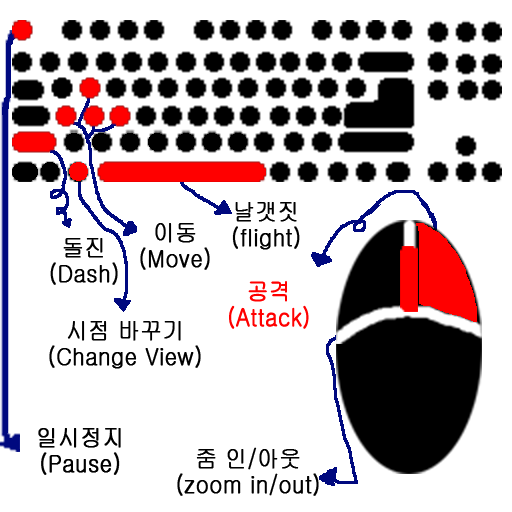
<style>
.page{position:relative;width:512px;height:512px;background:#ffffff}
.page>*{position:absolute;margin:0}
.t1{font:24px/26px "Gulim";color:#000000;font-weight:bold;scale:0.9 1}
.t2{font:24px/26px "Gulim";color:#ff0000;font-weight:bold;scale:0.9 1}
</style>
<div class="page">
<p class="t1" style="left:232px;top:202px;width:68px;height:48px;text-align:center">날갯짓<br>(flight)</p>
<p class="t1" style="left:140px;top:223px;width:70px;height:47px;text-align:center">이동<br>(Move)</p>
<p class="t1" style="left:50px;top:238px;width:68px;height:47px;text-align:center">돌진<br>(Dash)</p>
<p class="t2" style="left:229px;top:281px;width:80px;height:48px;text-align:center">공격<br>(Attack)</p>
<p class="t1" style="left:49px;top:321px;width:152px;height:48px;text-align:center">시점 바꾸기<br>(Change View)</p>
<p class="t1" style="left:38px;top:428px;width:83px;height:47px;text-align:center">일시정지<br>(Pause)</p>
<p class="t1" style="left:177px;top:447px;width:142px;height:49px;text-align:center">줌 인/아웃<br>(zoom in/out)</p>
</div>
